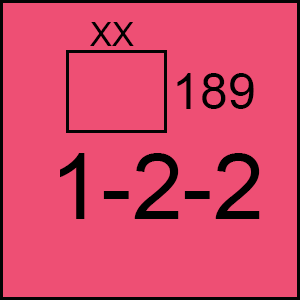
<style>
.page{position:relative;width:300px;height:300px;background:#ee4f74}
.page>*{position:absolute;margin:0}
.t1{font:33.3px "ArialMT";color:#000000}
.t2{font:50px "ArialMT";color:#000000}
.t3{font:91.7px "ArialMT";color:#000000}
</style>
<div class="page">
<p class="t1" style="left:90px;top:22px;width:44px;height:24px">XX</p>
<p class="t2" style="left:177px;top:73px;width:77px;height:36px">189</p>
<p class="t3" style="left:60px;top:153px;width:200px;height:66px">1-2-2</p>
</div>
